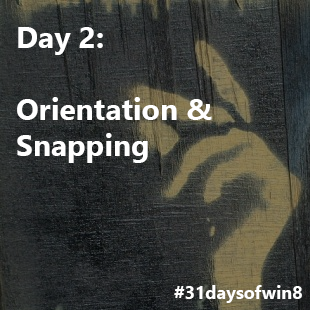
<style>
.page{position:relative;width:310px;height:310px}
.page>*{position:absolute;margin:0}
.t1{font:30px "SegoeUI-Bold";color:#ffffff}
.t2{font:18px "SegoeUI-Bold";color:#ffffff}
</style>
<div class="page">
<p class="t1" style="left:17px;top:27px;width:195px;height:136px">Day 2:<br><br>Orientation &amp;<br>Snapping</p>
<p class="t2" style="left:174px;top:285px;width:128px;height:18px">#31daysofwin8</p>
</div>
